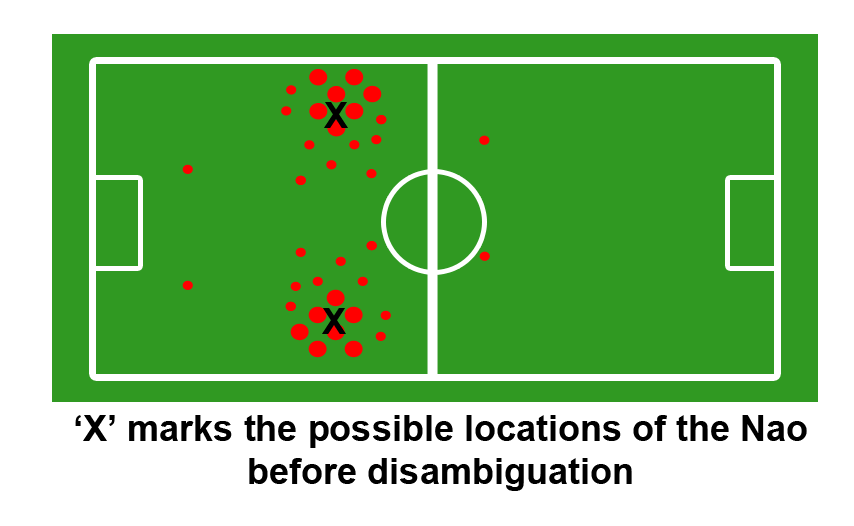
<style>
.page{position:relative;width:854px;height:526px;background:#309922}
.page>*{position:absolute;margin:0}
.t1{font:36px "Arial-BoldMT";color:#000000}
</style>
<div class="page">
<p class="t1" style="left:324px;top:102px;width:24px;height:26px">X</p>
<p class="t1" style="left:322px;top:308px;width:24px;height:26px">X</p>
<p class="t1" style="left:75px;top:415px;width:732px;height:76px;text-align:center">‘X’ marks the possible locations of the Nao<br>before disambiguation</p>
</div>
